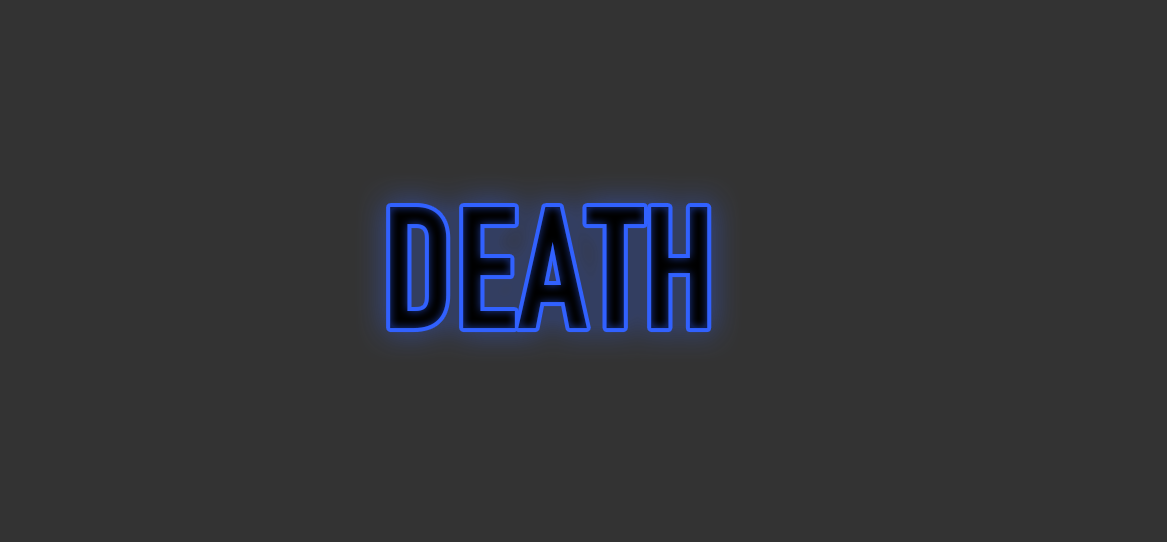
<style>
.page{position:relative;width:1167px;height:542px;background:#333333}
.page>*{position:absolute;margin:0}
.t1{font:170px "DINEngschrift";text-transform:uppercase}
</style>
<div class="page">
<p class="t1" style="left:390px;top:207px;width:318px;height:122px">DEATh</p>
</div>
